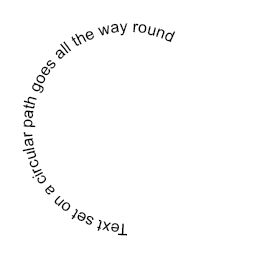
<style>
.page{position:relative;width:256px;height:256px;background:#ffffff}
.page>*{position:absolute;margin:0}
.t1{font:16px "ArialMT";color:#000000}
</style>
<div class="page">
<p class="t1" style="left:22px;top:23px;width:154px;height:213px">Text set on a circular path goes all the way round</p>
</div>
